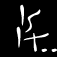
<style>
.page{position:relative;width:57px;height:57px;background:#000000}
.page>*{position:absolute;margin:0}
.t1{font:40px "Inkburrow";color:#ffffff;text-transform:uppercase}
</style>
<div class="page">
<p class="t1" style="left:20px;top:4px;width:21px;height:29px">Is</p>
</div>
